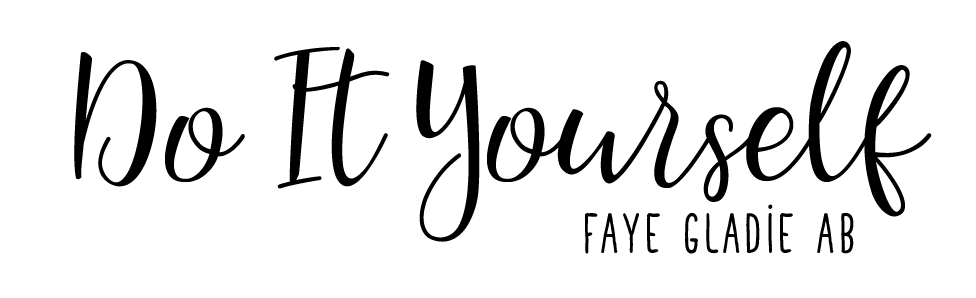
<style>
.page{position:relative;width:976px;height:298px;background:#ffffff}
.page>*{position:absolute;margin:0}
.t1{font:150px "Sanies-Script";color:#000000}
.t2{font:50px "TastyBirds-BoldSans";color:#000000}
</style>
<div class="page">
<p class="t1" style="left:74px;top:41px;width:858px;height:201px">Do It Yourself</p>
<p class="t2" style="left:585px;top:204px;width:269px;height:50px">Faye Gladie AB</p>
</div>
